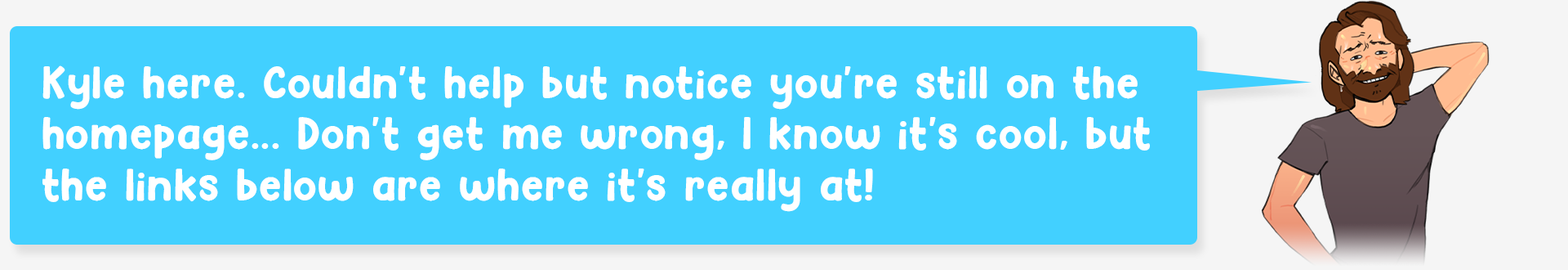
<style>
.page{position:relative;width:1568px;height:270px;background:#42d0ff}
.page>*{position:absolute;margin:0}
.t1{font:42.5px "Hey-Comic";letter-spacing:0.025em;color:#ffffff}
</style>
<div class="page">
<p class="t1" style="left:42px;top:65px;width:1108px;height:147px">Kyle here. Couldn't help but notice you're still on the homepage... Don't get me wrong, I know it's cool, but the links below are where it's really at!</p>
</div>
